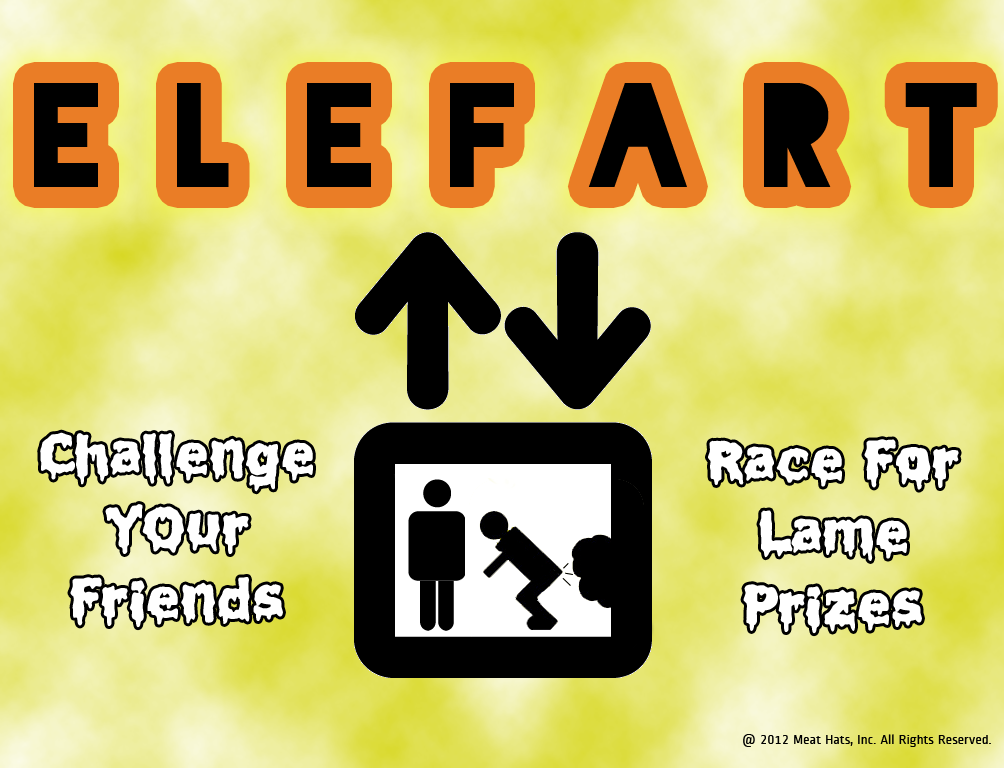
<style>
.page{position:relative;width:1004px;height:768px}
.page>*{position:absolute;margin:0}
.t1{font:140px "Blackout-Midnight";color:#000000}
.t2{font:60px "Liquidism";color:#ffffff}
.t3{font:14px "RopaSans-Regular";color:#000000}
</style>
<div class="page">
<p class="t1" style="left:34px;top:83px;width:943px;height:104px">E l e F a r t</p>
<p class="t2" style="left:40px;top:432px;width:273px;height:196px;text-align:center">Challenge<br>YOur<br>Friends</p>
<p class="t2" style="left:708px;top:439px;width:251px;height:195px;text-align:center">Race For<br>Lame<br>Prizes</p>
<p class="t3" style="left:743px;top:734px;width:248px;height:13px">@ 2012 Meat Hats, Inc. All Rights Reserved.</p>
</div>
